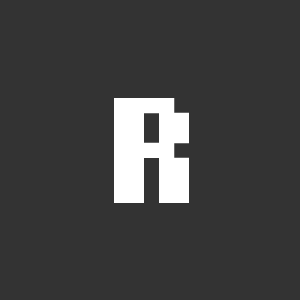
<style>
.page{position:relative;width:300px;height:300px;background:#333333}
.page>*{position:absolute;margin:0}
.t1{font:150px "Hardpixel";color:#ffffff}
</style>
<div class="page">
<p class="t1" style="left:114px;top:98px;width:75px;height:105px">R</p>
</div>
